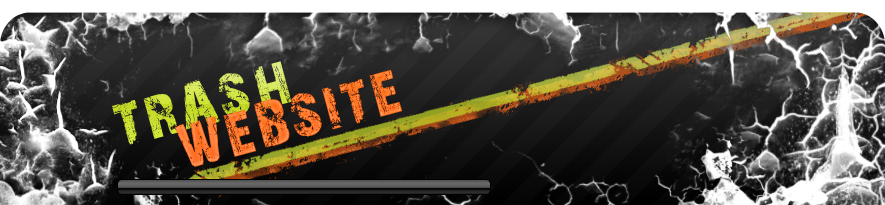
<style>
.page{position:relative;width:885px;height:205px}
.page>*{position:absolute;margin:0}
.t1{font:60px "28DaysLater";letter-spacing:0.08em}
.t2{font:60px "28DaysLater";letter-spacing:0.08em;color:#ff7e35}
</style>
<div class="page">
<p class="t1" style="left:112px;top:61px;width:180px;height:84px;rotate:-15deg">TRASH</p>
<p class="t2" style="left:174px;top:70px;width:229px;height:97px;rotate:-15deg">WEBSITE</p>
</div>
